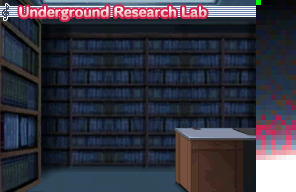
<style>
.page{position:relative;width:296px;height:192px}
.page>*{position:absolute;margin:0}
.t1{font:12px "HummingStd-E";letter-spacing:0.02em}
</style>
<div class="page">
<p class="t1" style="left:19px;top:6px;width:188px;height:14px">Underground Research Lab</p>
</div>
